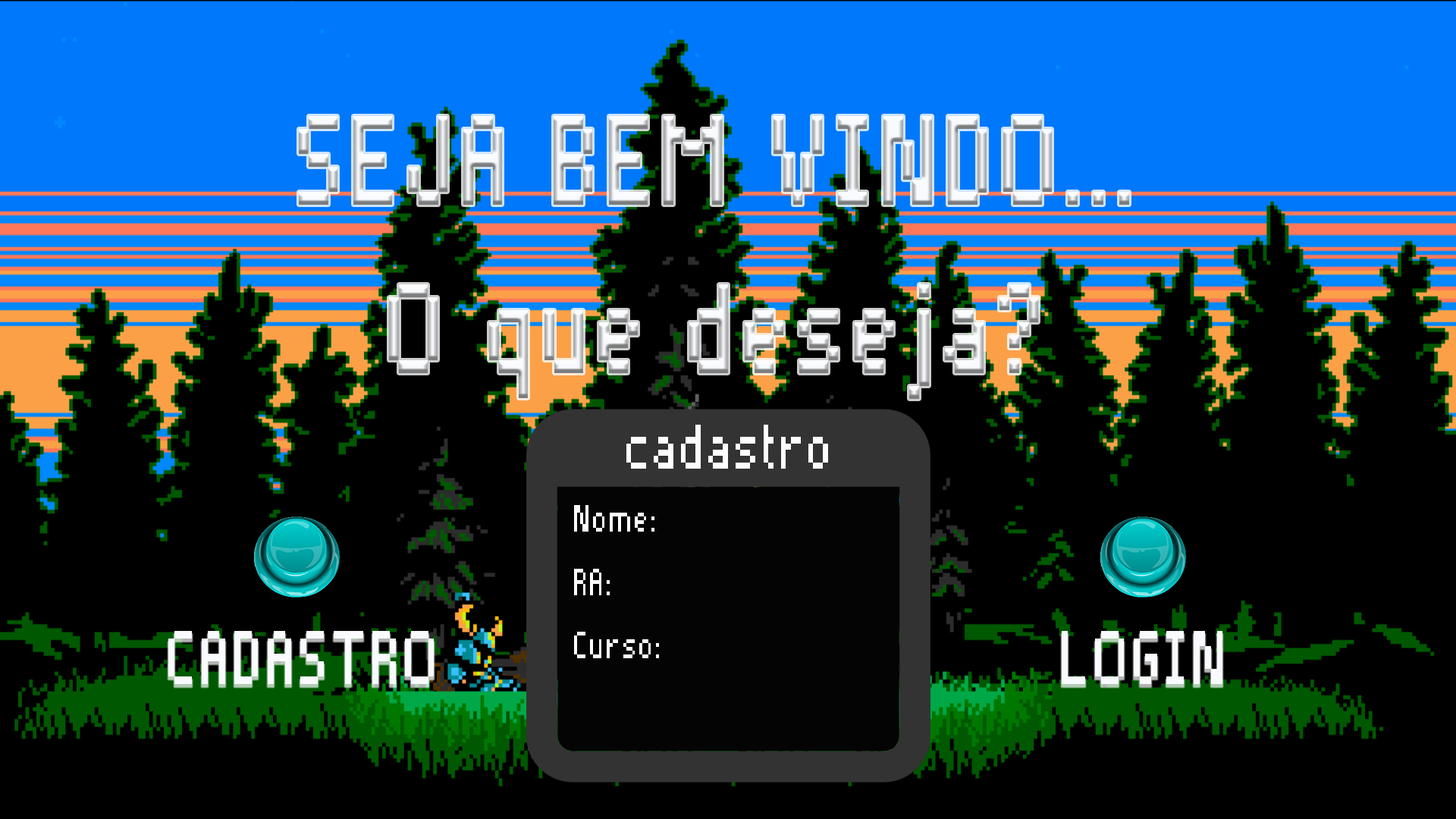
<style>
.page{position:relative;width:1456px;height:819px;background:#000000}
.page>*{position:absolute;margin:0}
.t1{font:164.3px/21.1px "Pixelade";letter-spacing:0.05em;scale:0.77 1}
.t2{font:49.3px/21.1px "Pixelade";letter-spacing:0.05em;color:#fffcfc;scale:0.77 1}
.t3{font:82.2px/21.1px "Pixelade";letter-spacing:0.05em;color:#fffcfc;scale:0.77 1}
.t4{font:98.6px "Pixelade";letter-spacing:0.05em;color:#f8fafd;scale:0.77 1}
</style>
<div class="page">
<p class="t1" style="left:299px;top:116px;width:830px;height:283px;text-align:center">SEJA BEM VINDO...<br><br><br><br><br><br><br><br>O que deseja?</p>
<p class="t2" style="left:574px;top:425px;width:254px;height:233px;text-align:center"><span class="t3">cadastro<br><br><br></span>Nome:<br><br><br>RA:<br><br><br>Curso:</p>
<p class="t4" style="left:168px;top:631px;width:266px;height:53px">CADASTRO</p>
<p class="t4" style="left:1062px;top:631px;width:160px;height:53px">LOGIN</p>
</div>
